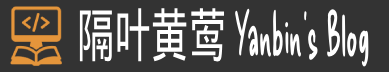
<style>
.page{position:relative;width:389px;height:72px;background:#333333}
.page>*{position:absolute;margin:0}
.t1{font:58.9px "DeliciousHandrawn-Regular";color:#ffffff;scale:0.53 1}
.t2{font:58.9px "DroidSansFallback";color:#ffffff;scale:0.63 1}
</style>
<div class="page">
<p class="t1" style="left:79px;top:8px;width:290px;height:59px"><span class="t2">隔叶黄莺 </span>Yanbin's Blog</p>
</div>
